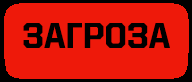
<style>
.page{position:relative;width:192px;height:82px;background:#ee190a}
.page>*{position:absolute;margin:0}
.t1{font:36px "UnitedSansReg-Heavy";color:#000000;scale:0.95 1}
</style>
<div class="page">
<p class="t1" style="left:23px;top:23px;width:147px;height:25px">ЗАГРОЗА</p>
</div>
